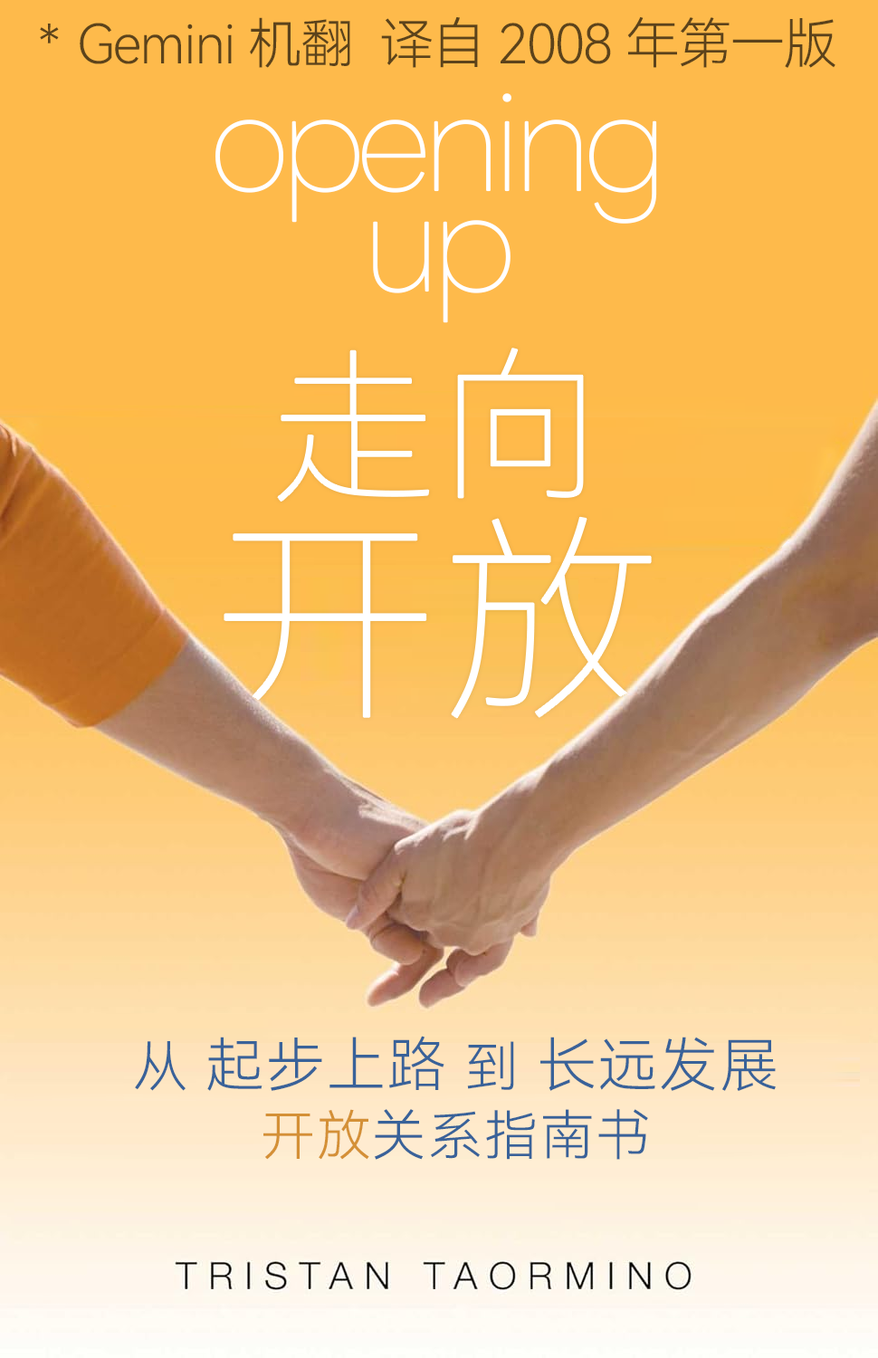
<style>
.page{position:relative;width:878px;height:1358px;background:#feba4b}
.page>*{position:absolute;margin:0}
.t1{font:54.3px "HarmonyOS_Sans_SC_Light";letter-spacing:-0.03em;color:#5c431b}
.t2{font:141.9px/100.8px "LINESeedSans-Thin";letter-spacing:-0.068em;color:#ffffff}
.t3{font:54.3px/72.4px "HarmonyOS_Sans_SC_Light";letter-spacing:0.03em;color:#396299;text-transform:uppercase}
.t4{font:58.8px/72.4px "HarmonyOS_Sans_SC_Light";letter-spacing:0.03em;color:#396299;text-transform:uppercase}
.t5{font:54.3px/72.4px "HarmonyOS_Sans_SC_Light";letter-spacing:0.03em;color:#d49036;text-transform:uppercase}
</style>
<div class="page">
<p class="t1" style="left:40px;top:16px;width:796px;height:52px">Gemini 机翻  译自2008年第一版</p>
<p class="t2" style="left:215px;top:93px;width:442px;height:230px;text-align:center">opening<br>up</p>
<p class="t3" style="left:135px;top:1036px;width:641px;height:124px;text-align:center">从 <span class="t4">起步上路 </span>到 <span class="t4">长远发展<br></span><span class="t5">开放</span>关系指南书</p>
</div>
